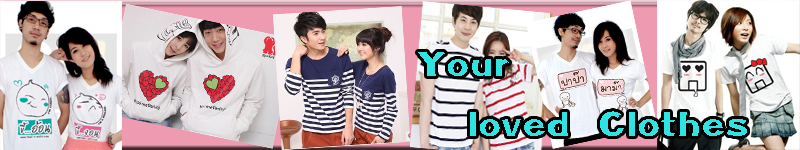
<style>
.page{position:relative;width:800px;height:150px}
.page>*{position:absolute;margin:0}
.t1{font:49.5px "TS-Somtum-A-NP";color:#2de4e2;scale:1.4 1}
</style>
<div class="page">
<p class="t1" style="left:418px;top:52px;width:329px;height:84px;text-align:center">Your <br>          loved Clothes</p>
</div>
